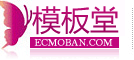
<style>
.page{position:relative;width:134px;height:60px;background:#fffbff}
.page>*{position:absolute;margin:0}
.t1{font:29px "MicrosoftYaHei";color:#bf0267}
.t2{font:10px "BellMT";color:#ffffff;font-weight:bold}
</style>
<div class="page">
<p class="t1" style="left:32px;top:6px;width:87px;height:29px">模板堂</p>
<p class="t2" style="left:34px;top:39px;width:79px;height:7px">ECMOBAN.COM</p>
</div>
